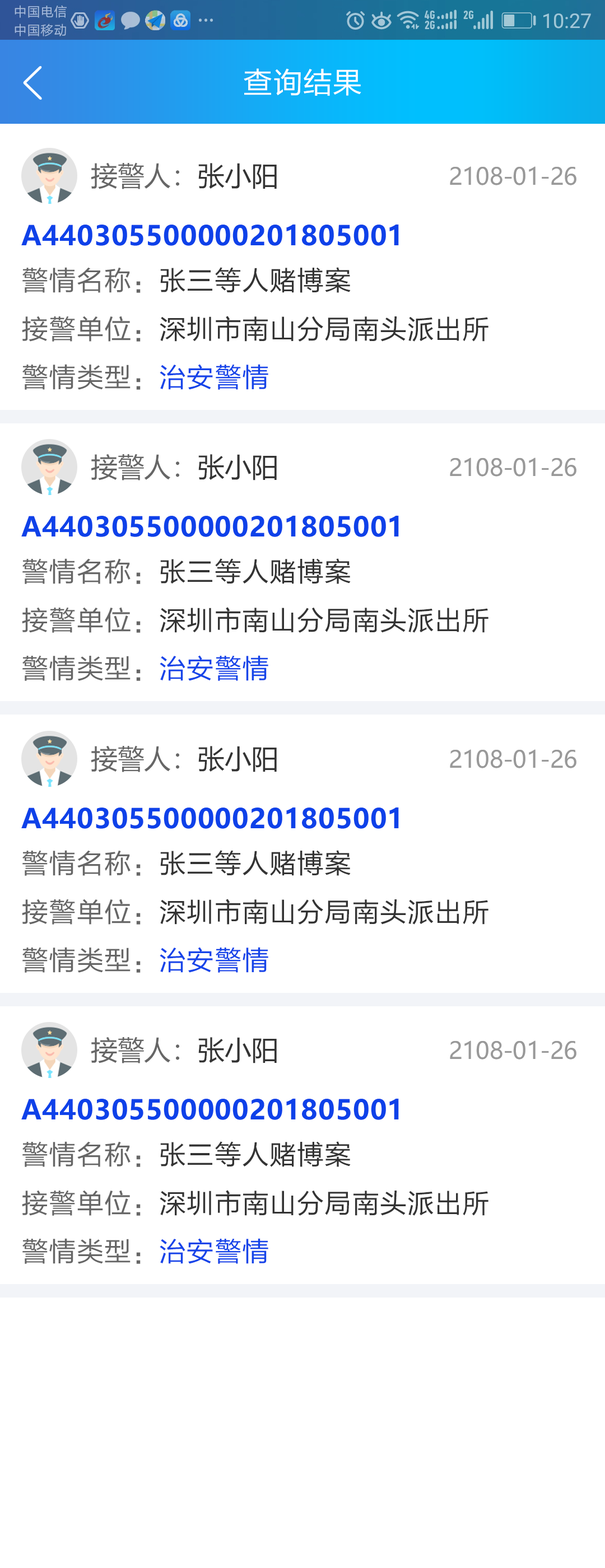
<style>
.page{position:relative;width:605px;height:1568px;background:#ffffff}
.page>*{position:absolute;margin:0}
.t1{font:29.1px "FZLTHK--GBK1-0";letter-spacing:0.025em;color:#ffffff}
.t2{font:26.9px "MicrosoftYaHei";color:#666666}
.t3{font:26.9px "MicrosoftYaHei";color:#333333}
.t4{font:23.5px "MicrosoftYaHei";letter-spacing:-0.01em;color:#999999}
.t5{font:26.9px "MicrosoftYaHei-Bold";letter-spacing:0.025em;color:#0e41e9}
.t6{font:26.9px "FZLTHK--GBK1-0";letter-spacing:0.025em;color:#333333}
.t7{font:26.9px "FZLTHK--GBK1-0";letter-spacing:0.025em;color:#666666}
.t8{font:26.9px "FZLTHK--GBK1-0";letter-spacing:0.025em;color:#1544e9}
</style>
<div class="page">
<p class="t1" style="left:244px;top:68px;width:117px;height:28px">查询结果</p>
<p class="t2" style="left:91px;top:162px;width:186px;height:27px">接警人：<span class="t3">张小阳</span></p>
<p class="t4" style="left:450px;top:166px;width:126px;height:19px">2108-01-26</p>
<p class="t5" style="left:21px;top:224px;width:378px;height:22px">A440305500000201805001</p>
<p class="t6" style="left:22px;top:267px;width:329px;height:26px"><span class="t7">警情名称：</span>张三等人赌博案</p>
<p class="t6" style="left:22px;top:316px;width:466px;height:26px"><span class="t7">接警单位：</span>深圳市南山分局南头派出所</p>
<p class="t7" style="left:22px;top:364px;width:246px;height:26px">警情类型：<span class="t8">治安警情</span></p>
<p class="t2" style="left:91px;top:454px;width:186px;height:26px">接警人：<span class="t3">张小阳</span></p>
<p class="t4" style="left:450px;top:458px;width:126px;height:19px">2108-01-26</p>
<p class="t5" style="left:21px;top:515px;width:378px;height:22px">A440305500000201805001</p>
<p class="t6" style="left:22px;top:558px;width:329px;height:26px"><span class="t7">警情名称：</span>张三等人赌博案</p>
<p class="t6" style="left:22px;top:607px;width:466px;height:26px"><span class="t7">接警单位：</span>深圳市南山分局南头派出所</p>
<p class="t7" style="left:22px;top:655px;width:246px;height:26px">警情类型：<span class="t8">治安警情</span></p>
<p class="t2" style="left:91px;top:745px;width:186px;height:27px">接警人：<span class="t3">张小阳</span></p>
<p class="t4" style="left:450px;top:749px;width:126px;height:19px">2108-01-26</p>
<p class="t5" style="left:21px;top:807px;width:378px;height:22px">A440305500000201805001</p>
<p class="t6" style="left:22px;top:850px;width:329px;height:26px"><span class="t7">警情名称：</span>张三等人赌博案</p>
<p class="t6" style="left:22px;top:899px;width:466px;height:26px"><span class="t7">接警单位：</span>深圳市南山分局南头派出所</p>
<p class="t7" style="left:22px;top:947px;width:246px;height:26px">警情类型：<span class="t8">治安警情</span></p>
<p class="t2" style="left:91px;top:1037px;width:186px;height:26px">接警人：<span class="t3">张小阳</span></p>
<p class="t4" style="left:450px;top:1040px;width:126px;height:20px">2108-01-26</p>
<p class="t5" style="left:21px;top:1098px;width:378px;height:22px">A440305500000201805001</p>
<p class="t6" style="left:22px;top:1141px;width:329px;height:26px"><span class="t7">警情名称：</span>张三等人赌博案</p>
<p class="t6" style="left:22px;top:1190px;width:466px;height:26px"><span class="t7">接警单位：</span>深圳市南山分局南头派出所</p>
<p class="t7" style="left:22px;top:1238px;width:246px;height:26px">警情类型：<span class="t8">治安警情</span></p>
</div>
